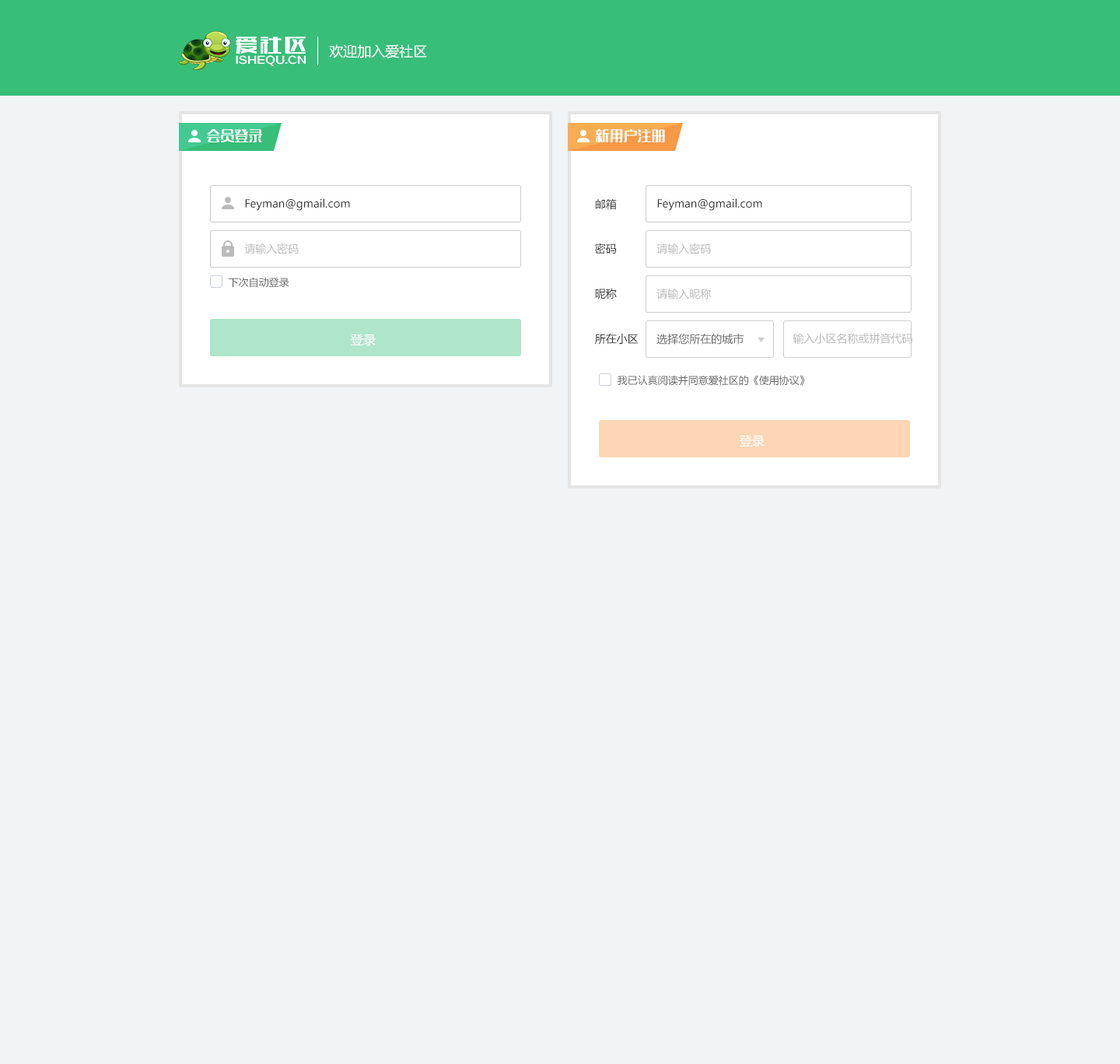
<style>
.page{position:relative;width:1120px;height:1064px;background:#f2f3f4}
.page>*{position:absolute;margin:0}
.t1{font:14px "MicrosoftYaHei";color:#ffffff}
.t2{font:14px "MFLangQian_Noncommercial-Regular";color:#ffffff}
.t3{font:10.9px "MicrosoftYaHei";color:#333333}
.t4{font:10.9px "MicrosoftYaHei";color:#bbbbbb}
.t5{font:10.1px "MicrosoftYaHei";color:#666666}
.t6{font:12.4px "MicrosoftYaHei";color:#ffffff}
.t7{font:10.9px "MicrosoftYaHei";color:#666666}
</style>
<div class="page">
<p class="t1" style="left:329px;top:44px;width:98px;height:14px">欢迎加入爱社区</p>
<p class="t2" style="left:207px;top:129px;width:55px;height:14px">会员登录</p>
<p class="t2" style="left:596px;top:129px;width:69px;height:14px">新用户注册</p>
<p class="t3" style="left:245px;top:198px;width:105px;height:13px">Feyman@gmail.com</p>
<p class="t3" style="left:595px;top:199px;width:22px;height:11px">邮箱</p>
<p class="t3" style="left:657px;top:198px;width:105px;height:13px">Feyman@gmail.com</p>
<p class="t4" style="left:244px;top:244px;width:55px;height:10px">请输入密码</p>
<p class="t3" style="left:595px;top:243px;width:21px;height:11px">密码</p>
<p class="t4" style="left:657px;top:244px;width:54px;height:10px">请输入密码</p>
<p class="t5" style="left:229px;top:277px;width:60px;height:11px">下次自动登录</p>
<p class="t3" style="left:595px;top:288px;width:22px;height:12px">昵称</p>
<p class="t4" style="left:657px;top:289px;width:54px;height:11px">请输入昵称</p>
<p class="t6" style="left:351px;top:334px;width:25px;height:12px">登录</p>
<p class="t3" style="left:595px;top:333px;width:43px;height:12px">所在小区</p>
<p class="t7" style="left:657px;top:334px;width:87px;height:11px">选择您所在的城市</p>
<p class="t4" style="left:793px;top:333px;width:120px;height:11px">输入小区名称或拼音代码</p>
<p class="t5" style="left:618px;top:375px;width:187px;height:11px">我已认真阅读并同意爱社区的《使用协议》</p>
<p class="t6" style="left:740px;top:435px;width:25px;height:12px">登录</p>
</div>
